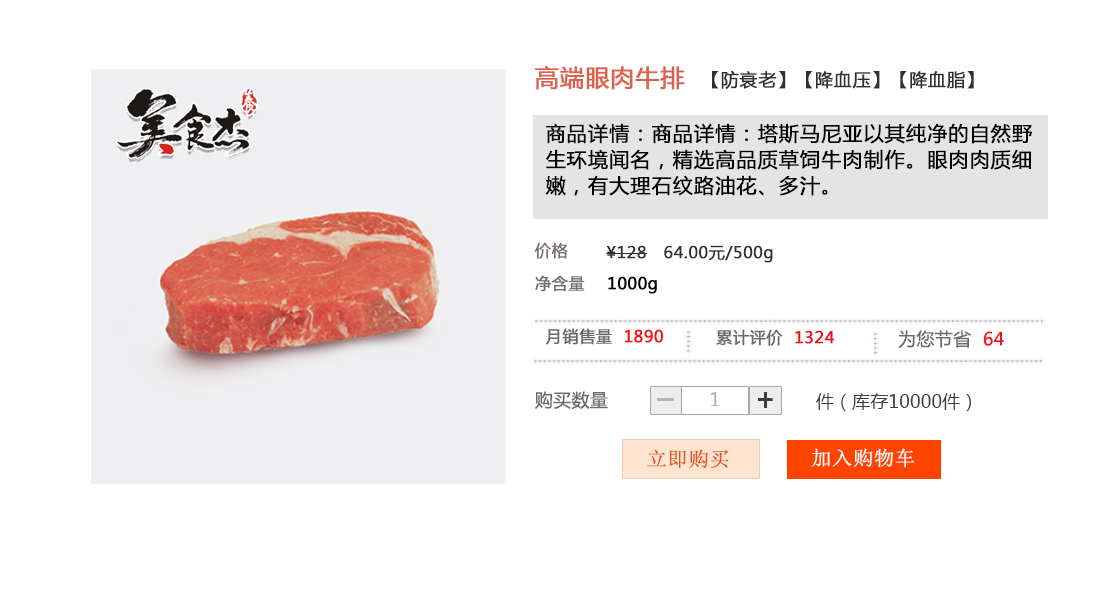
<style>
.page{position:relative;width:1100px;height:600px;background:#ffffff}
.page>*{position:absolute;margin:0}
.t1{font:18px "MicrosoftYaHei";letter-spacing:0.02em;color:#312f2f;font-weight:bold}
.t2{font:24px "MicrosoftYaHei";letter-spacing:0.02em;color:#dd614b;font-weight:bold}
.t3{font:20px/26px "MicrosoftYaHei";letter-spacing:0.02em;color:#000000;font-weight:bold}
.t4{font:20px/26px "MicrosoftYaHei";letter-spacing:0.02em;color:#0b0b0b;font-weight:bold}
.t5{font:16px "MicrosoftYaHei";letter-spacing:0.02em;color:#797070;font-weight:bold}
.t6{font:16px "MicrosoftYaHei";letter-spacing:0.02em;color:#312f2f;font-weight:bold}
.t7{font:18px "MicrosoftYaHei";letter-spacing:0.02em;color:#6d6967}
.t8{font:18px "MicrosoftYaHei";letter-spacing:0.02em;color:#f2131d}
.t9{font:18px "MicrosoftYaHei";letter-spacing:0.01em;color:#b0adad}
.t10{font:18px "MicrosoftYaHei";letter-spacing:0.01em;color:#3f3c3c}
.t11{font:20px "SimSun";letter-spacing:0.02em;color:#e5511d;font-weight:bold}
.t12{font:20px "SimSun";letter-spacing:0.02em;color:#fbf8f7;font-weight:bold}
</style>
<div class="page">
<p class="t1" style="left:534px;top:65px;width:440px;height:25px"><span class="t2">高端眼肉牛排  </span>【防衰老】【降血压】【降血脂】</p>
<p class="t3" style="left:545px;top:123px;width:487px;height:73px"><span class="t4">商品详情：</span>商品详情：塔斯马尼亚以其纯净的自然野生环境闻名，精选高品质草饲牛肉制作。眼肉肉质细嫩，有大理石纹路油花、多汁。</p>
<p class="t5" style="left:534px;top:242px;width:34px;height:17px">价格</p>
<p class="t6" style="left:606px;top:245px;width:167px;height:18px">¥128   64.00元/500g</p>
<p class="t7" style="left:898px;top:330px;width:106px;height:18px">为您节省  <span class="t8">64</span></p>
<p class="t7" style="left:535px;top:391px;width:73px;height:18px">购买数量</p>
<p class="t9" style="left:711px;top:392px;width:9px;height:14px">1</p>
<p class="t10" style="left:816px;top:393px;width:156px;height:18px">件（库存10000件）</p>
<p class="t11" style="left:647px;top:449px;width:82px;height:20px">立即购买</p>
<p class="t12" style="left:811px;top:448px;width:104px;height:20px">加入购物车</p>
</div>
